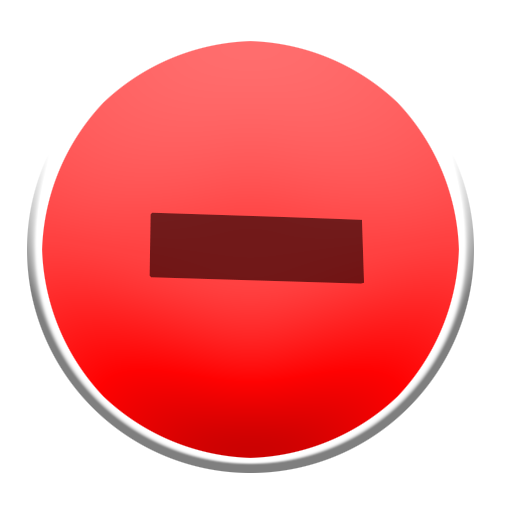
<style>
.page{position:relative;width:512px;height:512px;background:#ffffff}
.page>*{position:absolute;margin:0}
.t1{font:417.7px "CordelGroteska-Bold";color:#711919;scale:1.89 1}
</style>
<div class="page">
<p class="t1" style="left:149px;top:212px;width:216px;height:72px">-</p>
</div>
